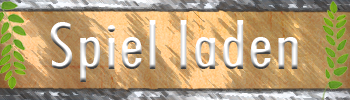
<style>
.page{position:relative;width:350px;height:100px}
.page>*{position:absolute;margin:0}
.t1{font:65px "FuturaBT-MediumCondensed";letter-spacing:0.04em}
</style>
<div class="page">
<p class="t1" style="left:50px;top:20px;width:248px;height:62px">Spiel laden</p>
</div>
